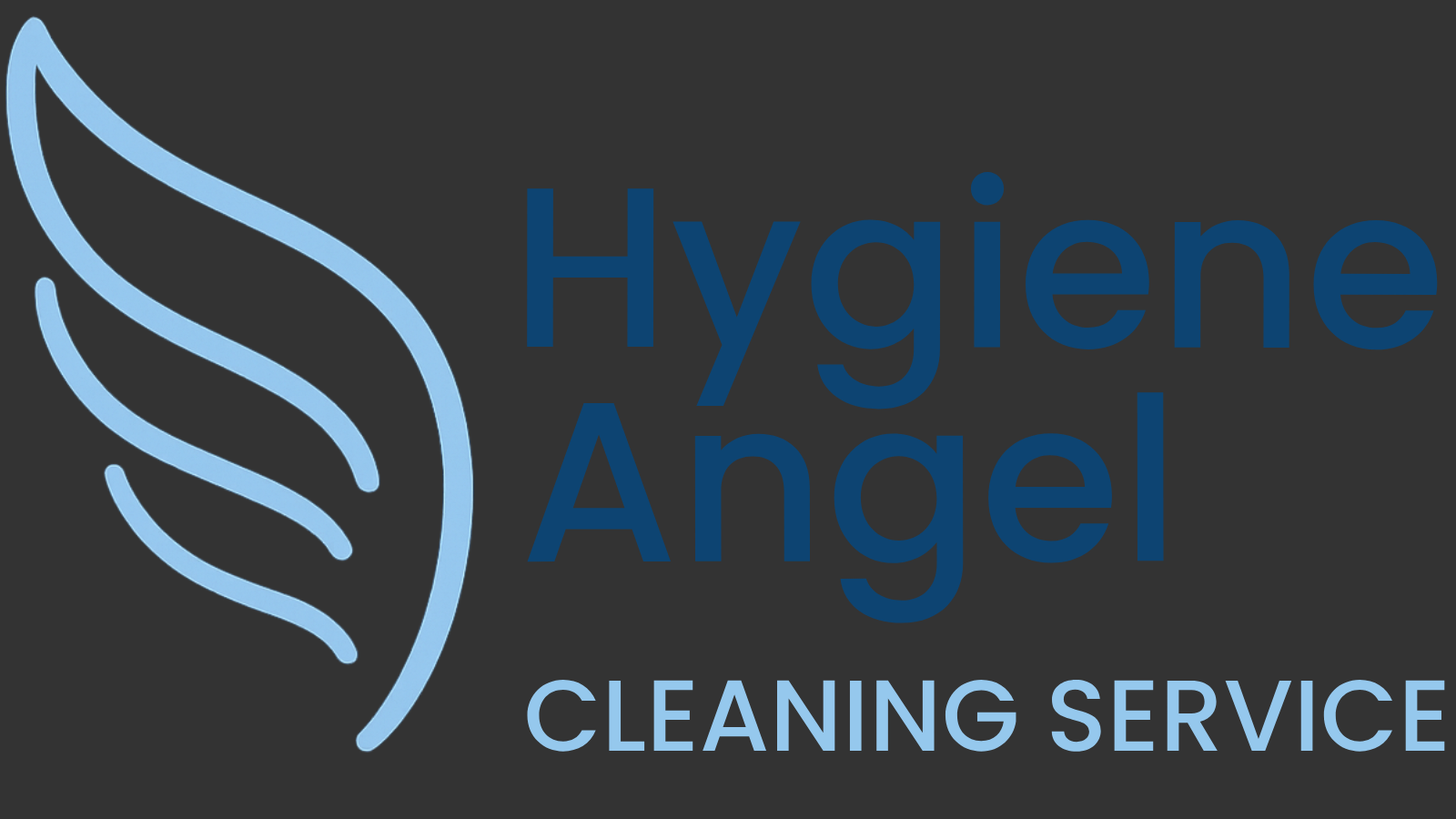
<style>
.page{position:relative;width:1456px;height:819px;background:#333333}
.page>*{position:absolute;margin:0}
.t1{font:227.5px "Poppins-Medium";color:#0d4472}
.t2{font:100.9px "Poppins-Medium";color:#95c8ed}
</style>
<div class="page">
<p class="t1" style="left:527px;top:172px;width:911px;height:237px">Hygiene</p>
<p class="t1" style="left:527px;top:392px;width:637px;height:231px">Angel</p>
<p class="t2" style="left:527px;top:680px;width:918px;height:72px">CLEANING SERVICE</p>
</div>
